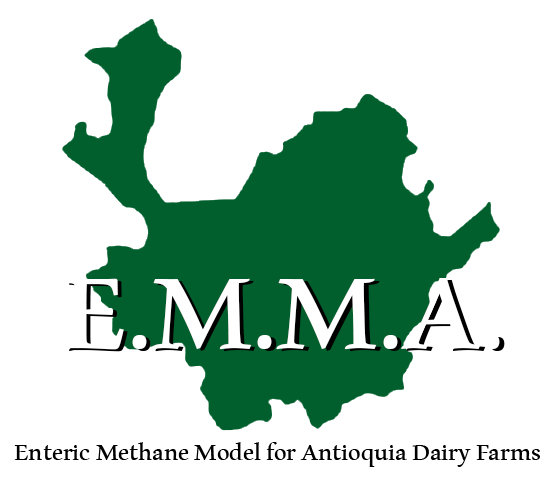
<style>
.page{position:relative;width:550px;height:480px;background:#ffffff}
.page>*{position:absolute;margin:0}
.t1{font:178px "Aldhabi";color:#ffffff}
.t2{font:39.8px "Aldhabi";color:#000000}
</style>
<div class="page">
<p class="t1" style="left:64px;top:278px;width:436px;height:72px">E.M.M.A.</p>
<p class="t2" style="left:14px;top:442px;width:526px;height:25px">Enteric Methane Model for Antioquia Dairy Farms</p>
</div>
